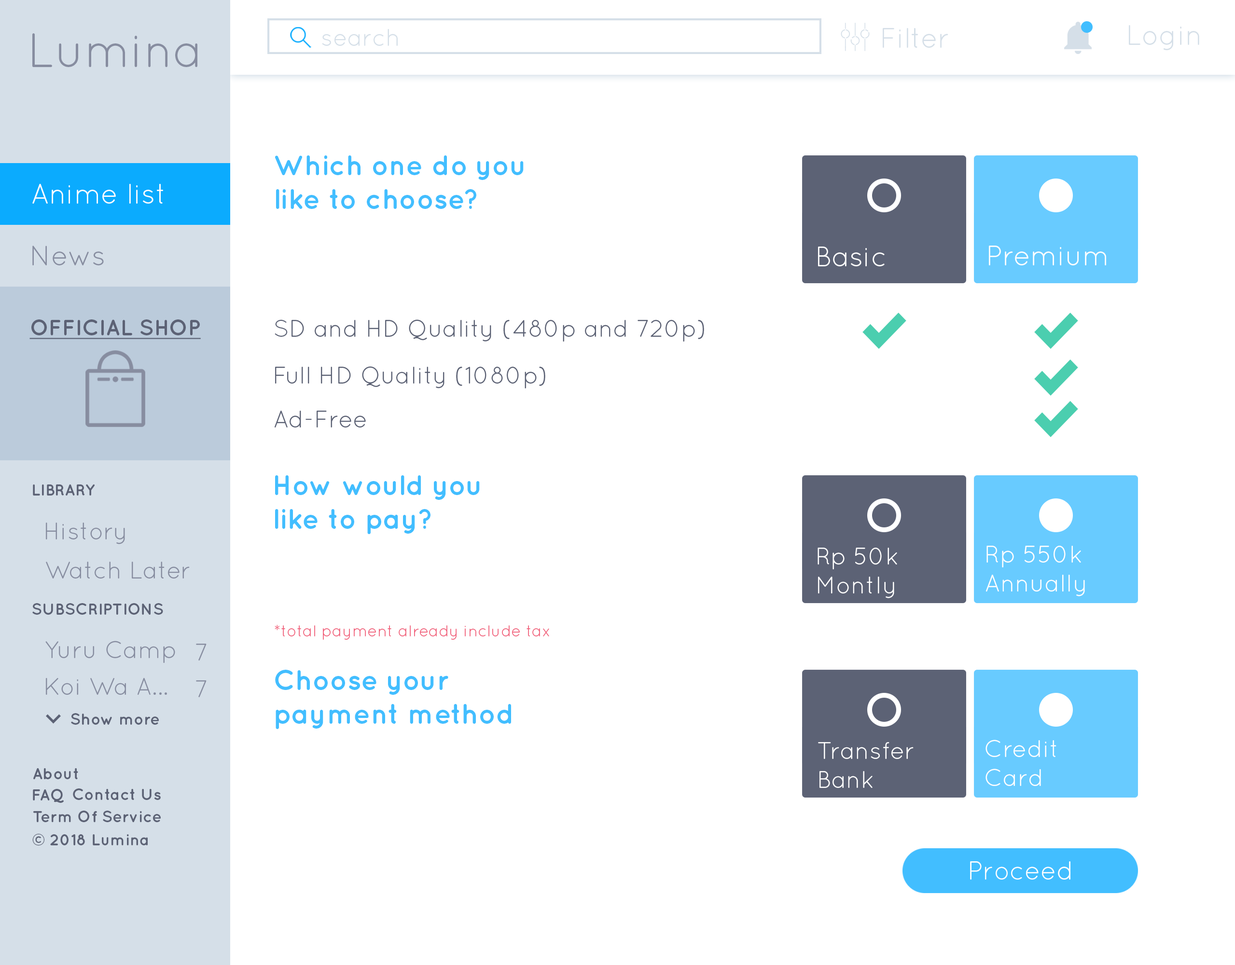
<style>
.page{position:relative;width:1235px;height:965px;background:#ffffff}
.page>*{position:absolute;margin:0}
.t1{font:24.1px "QuicksandBook-Regular";color:#d5dfe8}
.t2{font:28.2px "Quicksand-Regular";color:#d5dfe8}
.t3{font:48.3px "QuicksandBook-Regular";color:#878da0}
.t4{font:28.2px "QuicksandBold-Regular";color:#42beff}
.t5{font:28.2px "QuicksandBook-Regular";color:#ffffff}
.t6{font:28.2px "QuicksandBook-Regular";color:#878da0}
.t7{font:22.1px "QuicksandBold-Regular";color:#5c6275;text-decoration:underline}
.t8{font:24.1px "QuicksandBook-Regular";color:#5c6275}
.t9{font:16.1px "QuicksandBold-Regular";color:#5c6275}
.t10{font:24.1px "QuicksandBook-Regular";color:#878da0}
.t11{font:24.1px "QuicksandBook-Regular";color:#ffffff}
.t12{font:16.1px "QuicksandBook-Regular";color:#f1637d}
.t13{font:16.1px "Quicksand-Bold";color:#5c6275}
.t14{font:26.2px "QuicksandBook-Regular";color:#ffffff}
</style>
<div class="page">
<p class="t1" style="left:322px;top:29px;width:76px;height:17px">search</p>
<p class="t2" style="left:883px;top:28px;width:65px;height:20px">Filter</p>
<p class="t2" style="left:1129px;top:25px;width:70px;height:25px">Login</p>
<p class="t3" style="left:32px;top:33px;width:165px;height:34px">Lumina</p>
<p class="t4" style="left:275px;top:155px;width:249px;height:54px">Which one do you <br>like to choose?</p>
<p class="t5" style="left:32px;top:184px;width:131px;height:20px">Anime list</p>
<p class="t6" style="left:32px;top:246px;width:72px;height:19px">News</p>
<p class="t5" style="left:989px;top:246px;width:117px;height:19px">Premium</p>
<p class="t5" style="left:818px;top:247px;width:67px;height:19px">Basic</p>
<p class="t7" style="left:29px;top:320px;width:172px;height:19px">OFFICIAL SHOP</p>
<p class="t8" style="left:275px;top:320px;width:429px;height:22px">SD and HD Quality (480p and 720p)</p>
<p class="t8" style="left:275px;top:366px;width:270px;height:23px">Full HD Quality (1080p)</p>
<p class="t8" style="left:275px;top:411px;width:91px;height:17px">Ad-Free</p>
<p class="t9" style="left:33px;top:485px;width:62px;height:11px">LIBRARY</p>
<p class="t4" style="left:275px;top:475px;width:205px;height:59px">How would you <br>like to pay?</p>
<p class="t10" style="left:46px;top:523px;width:79px;height:21px">History</p>
<p class="t11" style="left:986px;top:546px;width:99px;height:51px">Rp 550k<br>Annually</p>
<p class="t11" style="left:818px;top:548px;width:79px;height:51px">Rp 50k<br>Montly</p>
<p class="t10" style="left:46px;top:562px;width:144px;height:17px">Watch Later</p>
<p class="t9" style="left:32px;top:603px;width:131px;height:12px">SUBSCRIPTIONS</p>
<p class="t12" style="left:275px;top:625px;width:274px;height:15px">*total payment already include tax</p>
<p class="t10" style="left:45px;top:641px;width:130px;height:22px">Yuru Camp</p>
<p class="t10" style="left:196px;top:644px;width:11px;height:17px">7</p>
<p class="t4" style="left:275px;top:670px;width:236px;height:59px">Choose your <br>payment method</p>
<p class="t10" style="left:46px;top:678px;width:121px;height:17px">Koi Wa A...</p>
<p class="t10" style="left:196px;top:681px;width:11px;height:16px">7</p>
<p class="t13" style="left:71px;top:713px;width:88px;height:12px">Show more</p>
<p class="t11" style="left:818px;top:742px;width:96px;height:46px">Transfer<br>Bank</p>
<p class="t11" style="left:986px;top:740px;width:71px;height:46px">Credit<br>Card</p>
<p class="t13" style="left:33px;top:768px;width:45px;height:12px">About</p>
<p class="t13" style="left:33px;top:789px;width:31px;height:14px">FAQ</p>
<p class="t13" style="left:73px;top:789px;width:88px;height:11px">Contact Us</p>
<p class="t13" style="left:33px;top:811px;width:128px;height:12px">Term Of Service</p>
<p class="t13" style="left:32px;top:834px;width:116px;height:12px">© 2018 Lumina</p>
<p class="t14" style="left:970px;top:862px;width:101px;height:18px">Proceed</p>
</div>
